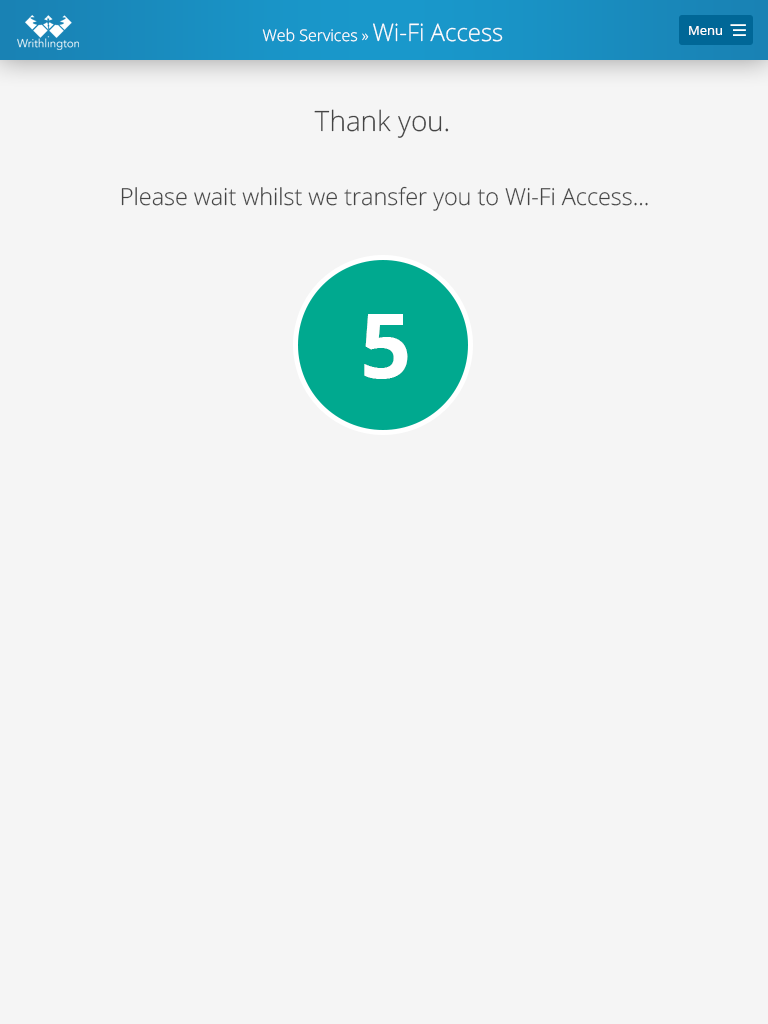
<style>
.page{position:relative;width:768px;height:1024px;background:#f5f5f5}
.page>*{position:absolute;margin:0}
.t1{font:16px "OpenSans-Light";color:#ffffff}
.t2{font:24px "OpenSans-Light";color:#ffffff}
.t3{font:13px "OpenSans";color:#ffffff}
.t4{font:28px "OpenSans-Light";color:#444444}
.t5{font:23.4px "OpenSans-Light";color:#444444}
.t6{font:90.4px "OpenSans-Bold";color:#ffffff}
</style>
<div class="page">
<p class="t1" style="left:262px;top:23px;width:241px;height:19px">Web Services » <span class="t2">Wi-Fi Access</span></p>
<p class="t3" style="left:689px;top:26px;width:33px;height:9px">Menu</p>
<p class="t4" style="left:314px;top:109px;width:135px;height:29px">Thank you.</p>
<p class="t5" style="left:121px;top:186px;width:527px;height:25px">Please wait whilst we transfer you to Wi-Fi Access...</p>
<p class="t6" style="left:364px;top:314px;width:44px;height:65px">5</p>
</div>
